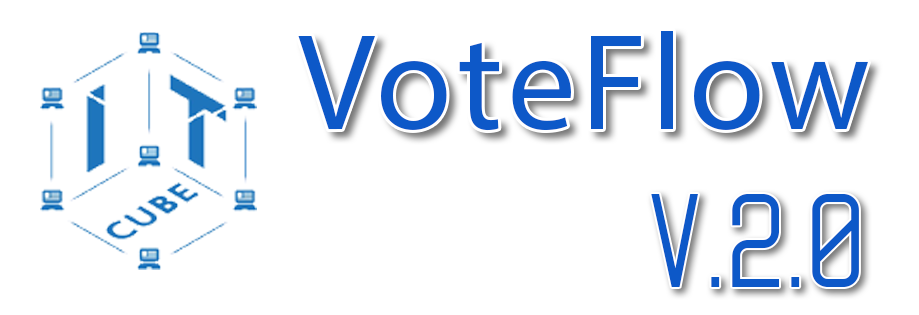
<style>
.page{position:relative;width:919px;height:315px;background:#ffffff}
.page>*{position:absolute;margin:0}
.t1{font:137.5px "MyriadPro-Regular";letter-spacing:0.04em;color:#0d58c8}
.t2{font:108.3px "Nikoleta";letter-spacing:0.04em;color:#0d58c8}
</style>
<div class="page">
<p class="t1" style="left:298px;top:31px;width:570px;height:100px">VoteFlow</p>
<p class="t2" style="left:651px;top:194px;width:208px;height:93px">v.2.0</p>
</div>
